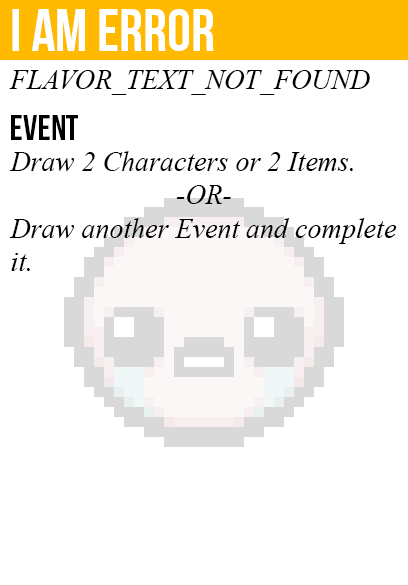
<style>
.page{position:relative;width:408px;height:585px;background:#ffffff}
.page>*{position:absolute;margin:0}
.t1{font:60px "BebasNeue";color:#ffffff}
.t2{font:28px "TimesNewRomanPS-ItalicMT";color:#000000}
.t3{font:36px "BebasNeue";color:#000000}
</style>
<div class="page">
<p class="t1" style="left:12px;top:9px;width:202px;height:42px">i am error</p>
<p class="t2" style="left:9px;top:70px;width:361px;height:25px">FLAVOR_TEXT_NOT_FOUND</p>
<p class="t3" style="left:11px;top:115px;width:67px;height:25px">event</p>
<p class="t2" style="left:9px;top:151px;width:388px;height:120px">Draw 2 Characters or 2 Items.<br><br>Draw another Event and complete<br>it.</p>
<p class="t2" style="left:176px;top:185px;width:55px;height:19px">-OR-</p>
</div>
